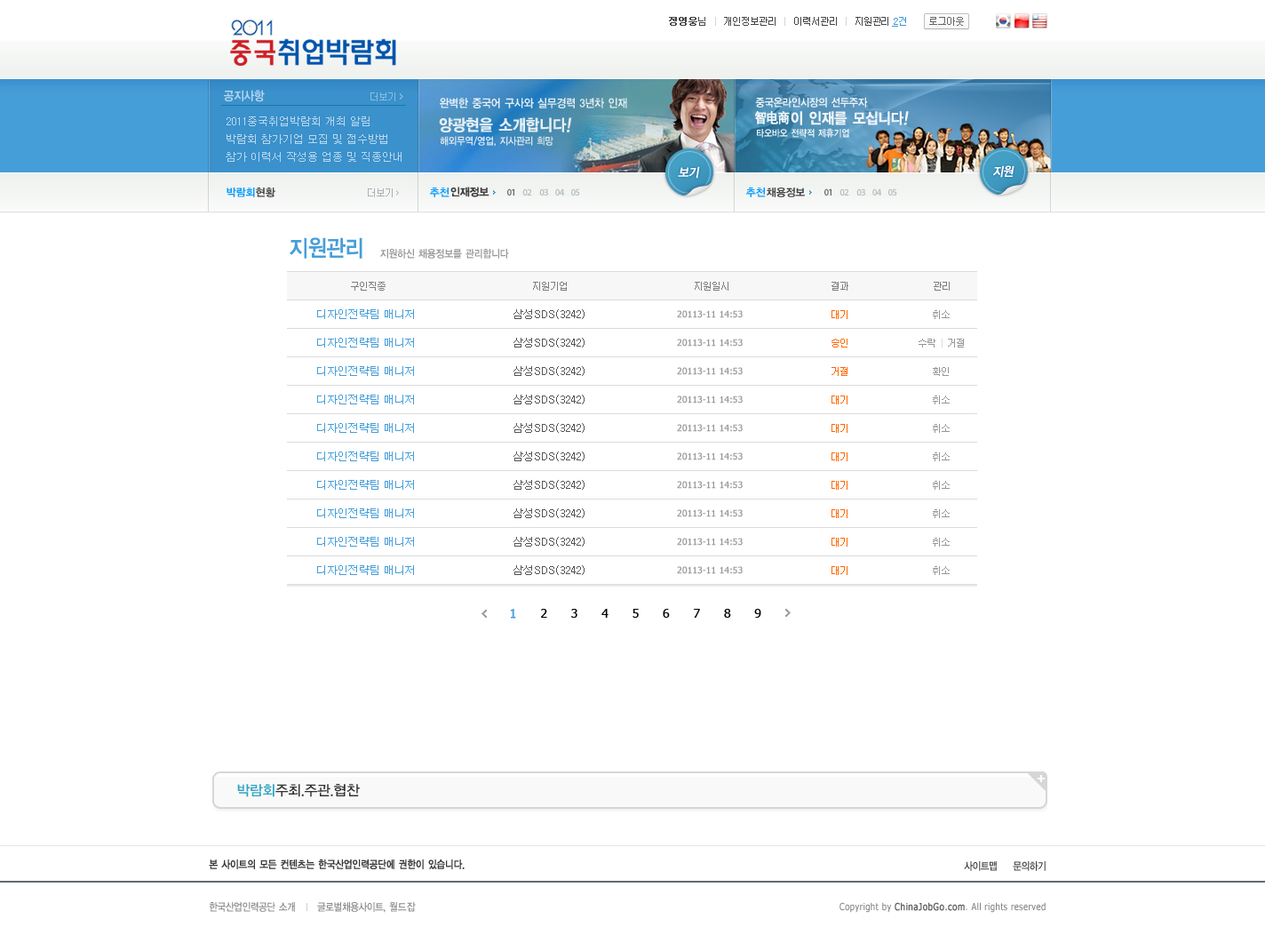
<style>
.page{position:relative;width:1265px;height:943px;background:#ffffff}
.page>*{position:absolute;margin:0}
.t1{font:9.8px "Dotum";letter-spacing:-0.1em;color:#464646}
.t2{font:9.8px "Dotum";letter-spacing:-0.1em;color:#464646;font-weight:bold}
.t3{font:9.8px "Dotum";letter-spacing:-0.1em;color:#d6d6d6}
.t4{font:9.8px "Dotum";color:#4298d5;text-decoration:underline}
.t5{font:9.8px "Dotum";color:#4298d5}
.t6{font:12.4px "YDIYGO140-KSCpc-EUC-H";letter-spacing:-0.1em;color:#b9d7ef;scale:0.9 1}
.t7{font:11.7px "YDIYGO140-KSCpc-EUC-H";letter-spacing:-0.1em;color:#e4eef4;scale:0.9 1}
.t8{font:11.1px "YDIYGO140-KSCpc-EUC-H";letter-spacing:-0.1em;color:#f0f5f8;scale:0.9 1}
.t9{font:13.8px "SimHei";letter-spacing:-0.1em;color:#f0f5f8;font-weight:bold;scale:0.9 1}
.t10{font:15.2px "YDIYGO140-KSCpc-EUC-H";letter-spacing:-0.1em;color:#f0f5f8;font-weight:bold;scale:0.9 1}
.t11{font:15.2px "YDIYGO140-KSCpc-EUC-H";letter-spacing:-0.1em;color:#f0f5f8;font-weight:bold;font-style:italic;scale:0.9 1}
.t12{font:10.7px/17.8px "Dotum";color:#b9d7ef}
.t13{font:16.1px "YDIYGO140-KSCpc-EUC-H";letter-spacing:-0.1em;color:#e4eef4;font-weight:bold;scale:0.9 1}
.t14{font:16.1px "YDIYGO140-KSCpc-EUC-H";letter-spacing:-0.1em;color:#e4eef4;font-weight:bold;font-style:italic;scale:0.9 1}
.t15{font:10.3px "YDIYGO140-KSCpc-EUC-H";letter-spacing:-0.1em;color:#dde8ef;scale:0.9 1}
.t16{font:9.7px "YDIYGO140-KSCpc-EUC-H";letter-spacing:-0.1em;color:#f0f5f8;scale:0.9 1}
.t17{font:12.4px "YDIYGO130-KSCpc-EUC-H";letter-spacing:-0.1em;color:#ffffff;font-weight:bold;font-style:italic;scale:0.9 1}
.t18{font:10.7px "YDIYGO140-KSCpc-EUC-H";letter-spacing:-0.1em;color:#0099ff}
.t19{font:10.7px "YDIYGO140-KSCpc-EUC-H";letter-spacing:-0.1em;color:#3e3e3e}
.t20{font:23.1px "YDIYGO140-KSCpc-EUC-H";letter-spacing:-0.1em;color:#469ed9;scale:0.9 1}
.t21{font:10.7px "YDIYGO140-KSCpc-EUC-H";letter-spacing:-0.1em;color:#999999;scale:0.9 1}
.t22{font:9.8px "Dotum";letter-spacing:-0.1em;color:#7d7d7d}
.t23{font:10.7px "Dotum";color:#469ed9}
.t24{font:10.7px "Dotum";color:#555555}
.t25{font:8.9px "Tahoma";color:#999999;font-weight:bold}
.t26{font:9.8px "Dotum";letter-spacing:-0.1em;color:#ff6600}
.t27{font:9.8px "Dotum";letter-spacing:-0.1em;color:#969696}
.t28{font:9.8px "Dotum";letter-spacing:-0.1em;color:#dbdbdb}
.t29{font:12.4px "Tahoma";letter-spacing:0.8em;color:#000000}
.t30{font:12.4px "Tahoma";letter-spacing:0.8em;color:#469ed9;font-weight:bold}
.t31{font:14.2px "YDIYGO130-KSCpc-EUC-H";letter-spacing:-0.1em;color:#323131}
.t32{font:14.2px "YDIYGO130-KSCpc-EUC-H";letter-spacing:-0.1em;color:#2ea2c2}
.t33{font:10.7px "YDIYGO130-KSCpc-EUC-H";letter-spacing:-0.1em;color:#373737;font-weight:bold;scale:0.86 1}
.t34{font:10.7px "YDIYGO130-KSCpc-EUC-H";letter-spacing:-0.1em;color:#373737;scale:0.86 1}
.t35{font:10.7px "YDIYGO130-KSCpc-EUC-H";letter-spacing:-0.1em;color:#868686;scale:0.86 1}
.t36{font:10.7px "YDIYGO130-KSCpc-EUC-H";letter-spacing:-0.05em;color:#868686;scale:0.86 1}
.t37{font:9.8px "Tahoma";letter-spacing:0.05em;color:#868686;scale:0.86 1}
.t38{font:9.8px "Tahoma";letter-spacing:0.05em;color:#626262;font-weight:bold;scale:0.86 1}
</style>
<div class="page">
<p class="t1" style="left:669px;top:17px;width:290px;height:9px"><span class="t2">정영웅</span>님   <span class="t3">| </span>  개인정보관리   <span class="t3">| </span>  이력서관리   <span class="t3">|</span>   지원관리             로그아웃</p>
<p class="t4" style="left:892px;top:17px;width:14px;height:10px">2<span class="t5">건</span></p>
<p class="t6" style="left:224px;top:90px;width:41px;height:12px">공지사항</p>
<p class="t7" style="left:440px;top:98px;width:187px;height:10px">완벽한 중국어 구사와 실무경력 3년차 인재</p>
<p class="t8" style="left:755px;top:97px;width:113px;height:10px">중국온라인시장의 선두주자</p>
<p class="t9" style="left:755px;top:111px;width:35px;height:13px">智电商</p>
<p class="t10" style="left:791px;top:111px;width:118px;height:14px">이 인재를 모십니다<span class="t11">!</span></p>
<p class="t12" style="left:226px;top:116px;width:176px;height:46px">2011중국취업박람회 개최 알림<br>박람회 참가기업 모집 및 접수방법<br>참가 이력서 작성용 업종 및 직종안내</p>
<p class="t13" style="left:439px;top:117px;width:133px;height:15px">양광현을 소개합니다<span class="t14">!</span></p>
<p class="t15" style="left:440px;top:136px;width:113px;height:11px">해외무역/영업, 지사관리 희망</p>
<p class="t16" style="left:757px;top:128px;width:92px;height:10px">타오바오 전략적 제휴기업</p>
<p class="t17" style="left:678px;top:166px;width:22px;height:13px">보기</p>
<p class="t17" style="left:993px;top:165px;width:22px;height:13px">지원</p>
<p class="t18" style="left:227px;top:187px;width:28px;height:10px">박람회</p>
<p class="t19" style="left:256px;top:187px;width:19px;height:10px">현황</p>
<p class="t18" style="left:430px;top:187px;width:20px;height:10px">추천</p>
<p class="t19" style="left:450px;top:187px;width:40px;height:10px">인재정보</p>
<p class="t18" style="left:746px;top:187px;width:20px;height:10px">추천</p>
<p class="t19" style="left:767px;top:187px;width:38px;height:10px">채용정보</p>
<p class="t20" style="left:290px;top:237px;width:72px;height:22px">지원관리</p>
<p class="t21" style="left:380px;top:249px;width:129px;height:10px">지원하신 채용정보를 관리합니다</p>
<p class="t22" style="left:351px;top:282px;width:35px;height:9px">구인직종</p>
<p class="t22" style="left:533px;top:282px;width:34px;height:9px">지원기업</p>
<p class="t22" style="left:695px;top:282px;width:33px;height:9px">지원일시</p>
<p class="t22" style="left:832px;top:282px;width:16px;height:9px">결과</p>
<p class="t22" style="left:934px;top:282px;width:16px;height:9px">관리</p>
<p class="t23" style="left:317px;top:309px;width:97px;height:10px">디자인전략팀 매니저</p>
<p class="t24" style="left:513px;top:309px;width:72px;height:10px">삼성SDS(3242)</p>
<p class="t25" style="left:677px;top:310px;width:66px;height:8px">20113-11 14:53</p>
<p class="t26" style="left:832px;top:310px;width:16px;height:9px">대기</p>
<p class="t27" style="left:933px;top:310px;width:17px;height:9px">취소</p>
<p class="t23" style="left:317px;top:338px;width:97px;height:9px">디자인전략팀 매니저</p>
<p class="t24" style="left:513px;top:338px;width:72px;height:9px">삼성SDS(3242)</p>
<p class="t25" style="left:677px;top:338px;width:66px;height:8px">20113-11 14:53</p>
<p class="t26" style="left:832px;top:338px;width:16px;height:9px">승인</p>
<p class="t27" style="left:919px;top:338px;width:45px;height:9px">수락  <span class="t28">|</span>  거절</p>
<p class="t23" style="left:317px;top:366px;width:97px;height:10px">디자인전략팀 매니저</p>
<p class="t24" style="left:513px;top:366px;width:72px;height:10px">삼성SDS(3242)</p>
<p class="t25" style="left:677px;top:367px;width:66px;height:8px">20113-11 14:53</p>
<p class="t26" style="left:832px;top:367px;width:16px;height:9px">거절</p>
<p class="t27" style="left:933px;top:367px;width:16px;height:9px">확인</p>
<p class="t23" style="left:317px;top:394px;width:97px;height:10px">디자인전략팀 매니저</p>
<p class="t24" style="left:513px;top:394px;width:72px;height:10px">삼성SDS(3242)</p>
<p class="t25" style="left:677px;top:395px;width:66px;height:8px">20113-11 14:53</p>
<p class="t26" style="left:832px;top:395px;width:16px;height:9px">대기</p>
<p class="t27" style="left:933px;top:395px;width:17px;height:9px">취소</p>
<p class="t29" style="left:510px;top:609px;width:251px;height:9px"><span class="t30">1</span> 2 3 4 5 6 7 8 9</p>
<p class="t31" style="left:237px;top:784px;width:123px;height:13px"><span class="t32">박람회</span>주최.주관.협찬</p>
<p class="t33" style="left:209px;top:859px;width:256px;height:10px">본 사이트의 모든 컨텐츠는 한국산업인력공단에 권한이 있습니다.</p>
<p class="t34" style="left:964px;top:861px;width:33px;height:10px">사이트맵</p>
<p class="t34" style="left:1013px;top:861px;width:33px;height:10px">문의하기</p>
<p class="t35" style="left:210px;top:902px;width:206px;height:10px">한국산업인력공단 소개      글로벌채용사이트, <span class="t36">월드잡</span></p>
<p class="t37" style="left:840px;top:902px;width:206px;height:10px">Copyright by <span class="t38">ChinaJobGo.com</span>. All rights reserved</p>
</div>
